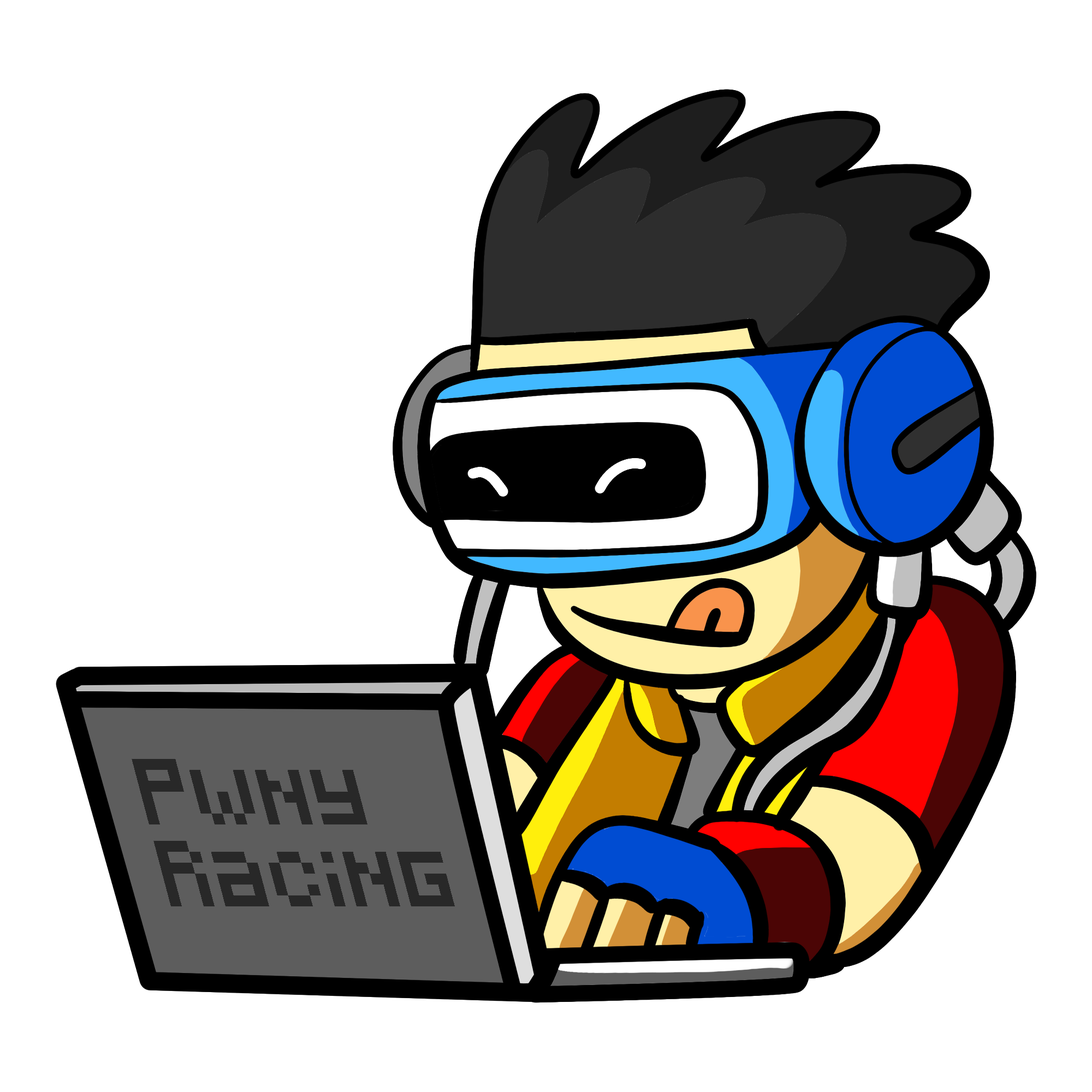
<style>
.page{position:relative;width:1092px;height:1092px;background:#ffffff}
.page>*{position:absolute;margin:0}
.t1{font:56.5px/84.7px "Pixeled";color:#282828;scale:0.97 1}
</style>
<div class="page">
<p class="t1" style="left:132px;top:759px;width:323px;height:147px">Pwny<br>Racing</p>
</div>
